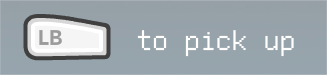
<style>
.page{position:relative;width:327px;height:75px}
.page>*{position:absolute;margin:0}
.t1{font:31.9px "FreePixel-Regular";color:#ffffff}
</style>
<div class="page">
<p class="t1" style="left:137px;top:30px;width:157px;height:27px">to pick up</p>
</div>
